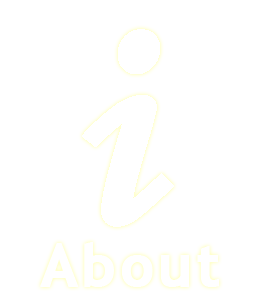
<style>
.page{position:relative;width:256px;height:300px;background:#ffffff}
.page>*{position:absolute;margin:0}
.t1{font:58.6px "TrebuchetMS-Bold";letter-spacing:0.05em;color:#ffffff;font-weight:bold}
</style>
<div class="page">
<p class="t1" style="left:40px;top:242px;width:179px;height:45px">About</p>
</div>
